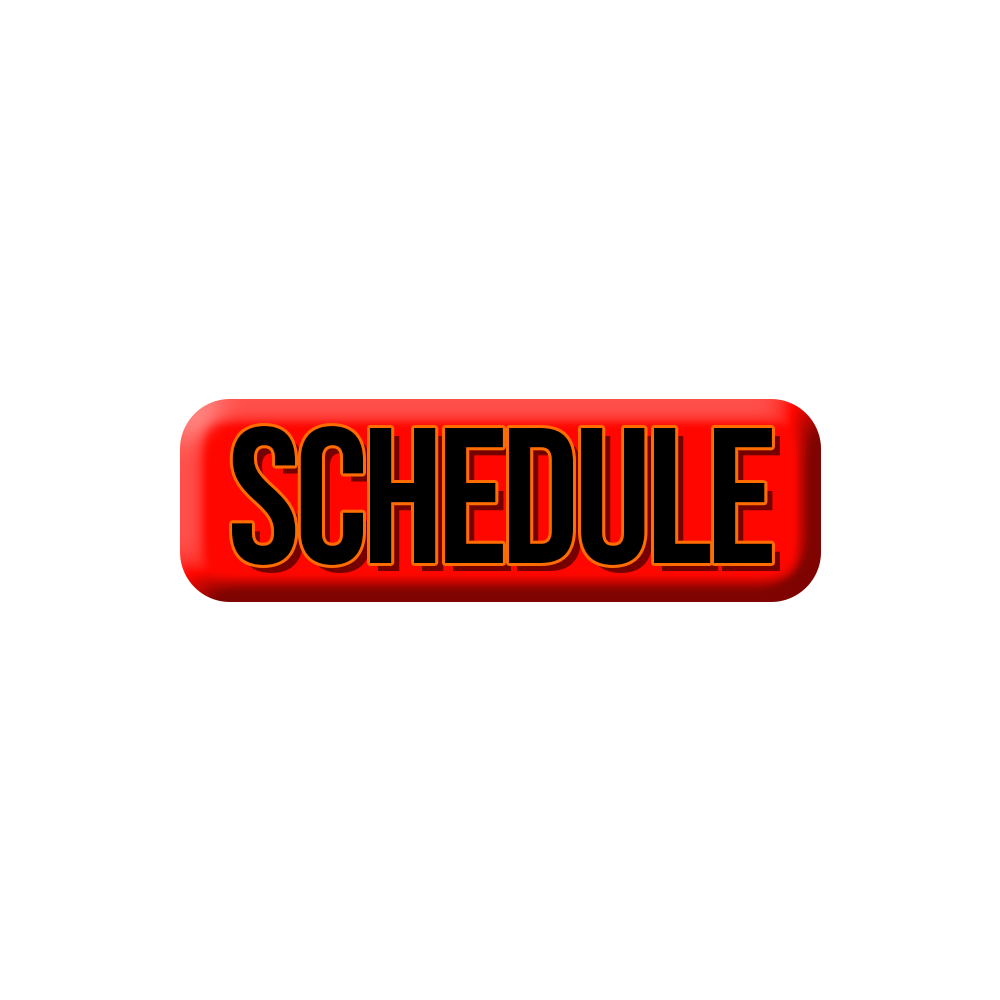
<style>
.page{position:relative;width:1000px;height:1000px;background:#ffffff}
.page>*{position:absolute;margin:0}
.t1{font:193.1px "BebasNeue-Regular";letter-spacing:-0.03em;color:#000000}
</style>
<div class="page">
<p class="t1" style="left:232px;top:426px;width:540px;height:139px">SCHedule</p>
</div>
